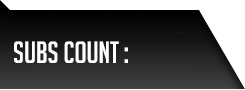
<style>
.page{position:relative;width:245px;height:90px;background:#ffffff}
.page>*{position:absolute;margin:0}
.t1{font:30px "BigNoodleTitling";color:#ffffff}
</style>
<div class="page">
<p class="t1" style="left:14px;top:41px;width:114px;height:22px">SUBS COUNT :</p>
</div>
